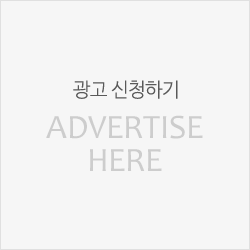
<style>
.page{position:relative;width:250px;height:250px;background:#f6f6f6}
.page>*{position:absolute;margin:0}
.t1{font:19.7px "NanumBarunGothicLight";letter-spacing:-0.01em;color:#595959}
.t2{font:34.3px/32.6px "Candara";letter-spacing:-0.01em;color:#cdcdcd}
</style>
<div class="page">
<p class="t1" style="left:73px;top:80px;width:105px;height:19px">광고 신청하기</p>
<p class="t2" style="left:46px;top:115px;width:157px;height:56px;text-align:center">ADVERTISE<br>HERE</p>
</div>
